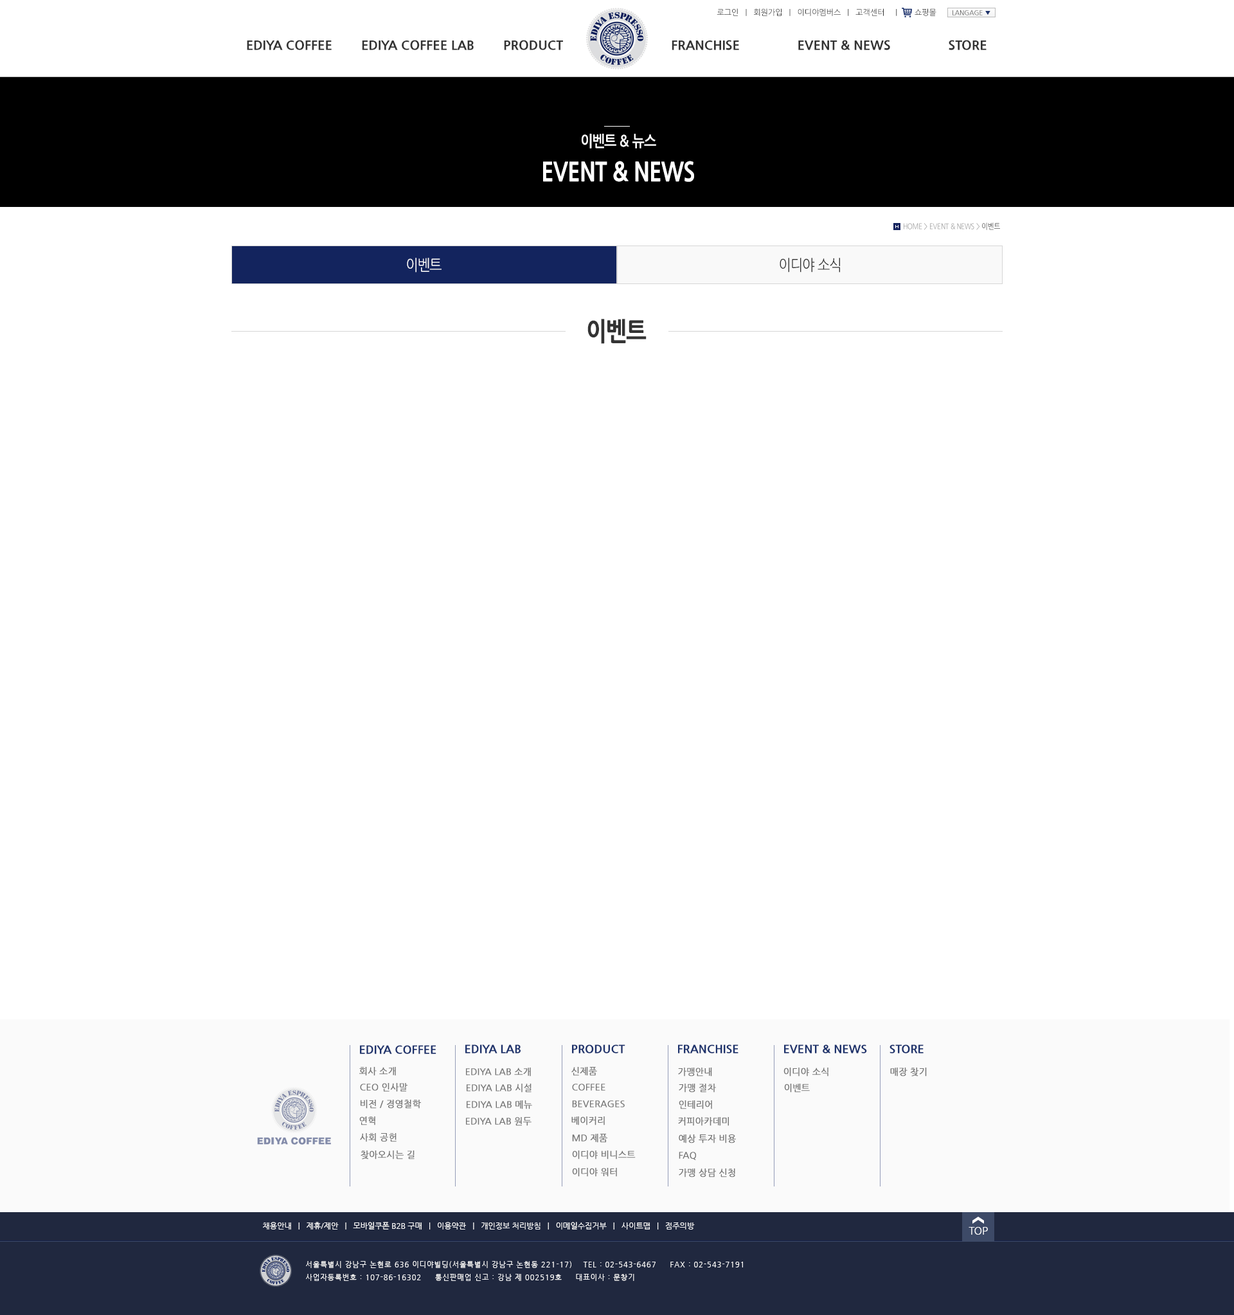
<style>
.page{position:relative;width:1234px;height:1315px;background:#ffffff}
.page>*{position:absolute;margin:0}
.t1{font:7.7px "NanumGothic";color:#333333}
.t2{font:6.4px "NanumGothic";color:#333333}
.t3{font:6.4px "NanumGothic";color:#1d326c}
.t4{font:12.9px "NanumGothicExtraBold";color:#333333}
.t5{font:15.4px "NanumGothicBold";letter-spacing:-0.03em;color:#ffffff;scale:0.85 1}
.t6{font:25.7px "NanumGothicExtraBold";letter-spacing:-0.03em;color:#ffffff;scale:0.85 1}
.t7{font:7.7px "NanumGothic";letter-spacing:-0.03em;color:#989898;scale:0.85 1}
.t8{font:7.7px "NanumGothic";letter-spacing:-0.03em;color:#333333;scale:0.85 1}
.t9{font:15.4px "NanumGothic";letter-spacing:-0.03em;color:#ffffff;scale:0.85 1}
.t10{font:15.4px "NanumGothic";letter-spacing:-0.03em;color:#333333;scale:0.85 1}
.t11{font:25.7px "NanumGothicExtraBold";letter-spacing:-0.03em;color:#333333;scale:0.85 1}
.t12{font:11.6px "NanumGothicExtraBold";color:#1d326c}
.t13{font:9px "NanumGothic";color:#747474;font-weight:bold}
.t14{font:7.7px "NanumGothic";color:#ffffff}
.t15{font:10.3px "NanumGothic";color:#ffffff}
.t16{font:7.1px/12.9px "NanumGothic";letter-spacing:0.1em;color:#ffffff}
</style>
<div class="page">
<p class="t1" style="left:717px;top:8px;width:220px;height:8px">로그인   |   회원가입   |   이디야멤버스   |   고객센터     |        쇼핑몰</p>
<p class="t2" style="left:953px;top:10px;width:38px;height:5px">LANGAGE <span class="t3">▼</span></p>
<p class="t4" style="left:247px;top:40px;width:740px;height:10px">EDIYA COFFEE        EDIYA COFFEE LAB        PRODUCT                              FRANCHISE                EVENT &amp; NEWS                STORE</p>
<p class="t5" style="left:582px;top:134px;width:74px;height:14px">이벤트 &amp; 뉴스</p>
<p class="t6" style="left:543px;top:161px;width:151px;height:21px">EVENT &amp; NEWS</p>
<p class="t7" style="left:904px;top:222px;width:96px;height:8px">HOME &gt; EVENT &amp; NEWS &gt; <span class="t8">이벤트</span></p>
<p class="t9" style="left:407px;top:258px;width:35px;height:15px">이벤트</p>
<p class="t10" style="left:780px;top:258px;width:60px;height:15px">이디야 소식</p>
<p class="t11" style="left:588px;top:319px;width:59px;height:25px">이벤트</p>
<p class="t12" style="left:360px;top:1045px;width:77px;height:9px">EDIYA COFFEE</p>
<p class="t12" style="left:465px;top:1045px;width:56px;height:9px">EDIYA LAB</p>
<p class="t12" style="left:572px;top:1045px;width:54px;height:9px">PRODUCT</p>
<p class="t12" style="left:678px;top:1045px;width:61px;height:9px">FRANCHISE</p>
<p class="t12" style="left:784px;top:1045px;width:83px;height:9px">EVENT &amp; NEWS</p>
<p class="t12" style="left:890px;top:1045px;width:34px;height:9px">STORE</p>
<p class="t13" style="left:359px;top:1067px;width:37px;height:9px">회사 소개</p>
<p class="t13" style="left:466px;top:1068px;width:65px;height:9px">EDIYA LAB 소개</p>
<p class="t13" style="left:572px;top:1067px;width:25px;height:9px">신제품</p>
<p class="t13" style="left:678px;top:1068px;width:34px;height:9px">가맹안내</p>
<p class="t13" style="left:784px;top:1068px;width:45px;height:9px">이디야 소식</p>
<p class="t13" style="left:890px;top:1068px;width:37px;height:9px">매장 찾기</p>
<p class="t13" style="left:360px;top:1083px;width:48px;height:9px">CEO 인사말</p>
<p class="t13" style="left:467px;top:1084px;width:65px;height:9px">EDIYA LAB 시설</p>
<p class="t13" style="left:572px;top:1084px;width:34px;height:7px">COFFEE</p>
<p class="t13" style="left:679px;top:1084px;width:37px;height:9px">가맹 절차</p>
<p class="t13" style="left:784px;top:1084px;width:26px;height:9px">이벤트</p>
<p class="t13" style="left:361px;top:1100px;width:60px;height:9px">비전 / 경영철학</p>
<p class="t13" style="left:467px;top:1101px;width:65px;height:9px">EDIYA LAB 메뉴</p>
<p class="t13" style="left:572px;top:1101px;width:53px;height:7px">BEVERAGES</p>
<p class="t13" style="left:679px;top:1101px;width:33px;height:9px">인테리어</p>
<p class="t13" style="left:359px;top:1117px;width:16px;height:9px">연혁</p>
<p class="t13" style="left:466px;top:1117px;width:66px;height:9px">EDIYA LAB 원두</p>
<p class="t13" style="left:572px;top:1117px;width:33px;height:9px">베이커리</p>
<p class="t13" style="left:678px;top:1117px;width:51px;height:9px">커피아카데미</p>
<p class="t13" style="left:360px;top:1133px;width:37px;height:9px">사회 공헌</p>
<p class="t13" style="left:572px;top:1134px;width:36px;height:9px">MD 제품</p>
<p class="t13" style="left:679px;top:1135px;width:57px;height:9px">예상 투자 비용</p>
<p class="t13" style="left:361px;top:1151px;width:54px;height:9px">찾아오시는 길</p>
<p class="t13" style="left:572px;top:1151px;width:64px;height:9px">이디야 비니스트</p>
<p class="t13" style="left:679px;top:1152px;width:17px;height:8px">FAQ</p>
<p class="t13" style="left:572px;top:1168px;width:45px;height:9px">이디야 워터</p>
<p class="t13" style="left:679px;top:1169px;width:56px;height:9px">가맹 상담 신청</p>
<p class="t14" style="left:263px;top:1222px;width:432px;height:8px">채용안내   |   제휴/제안   |   모바일쿠폰 B2B 구매   |   이용약관   |   개인정보 처리방침   |   이메일수집거부   |   사이트맵   |   점주의방</p>
<p class="t15" style="left:969px;top:1227px;width:19px;height:8px">TOP</p>
<p class="t16" style="left:306px;top:1261px;width:437px;height:20px">서울특별시 강남구 논현로 636 이디야빌딩(서울특별시 강남구 논현동 221-17)    TEL : 02-543-6467     FAX : 02-543-7191<br>사업자등록번호 : 107-86-16302     통신판매업 신고 : 강남 제 002519호     대표이사 : 문창기</p>
</div>
